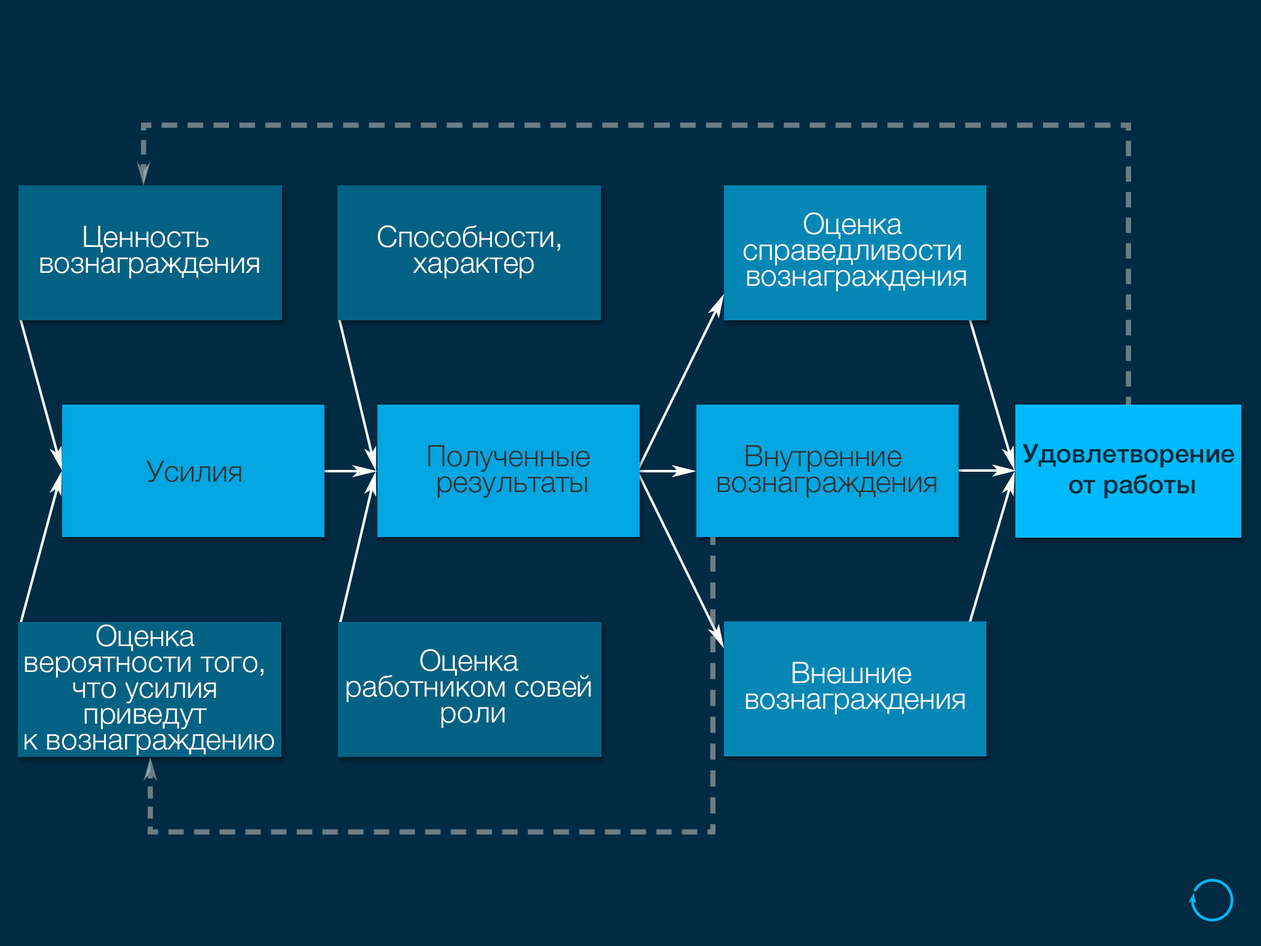
<style>
.page{position:relative;width:1261px;height:946px;background:#002b43}
.page>*{position:absolute;margin:0}
.t1{font:29.6px/25.9px "HelveticaNeue-Light";color:#ffffff}
.t2{font:29.6px/25.9px "HelveticaNeue-Light";color:#303030}
.t3{font:25.9px/30.8px "HelveticaNeue-Medium";color:#002b3b}
.t4{font:29.6px "HelveticaNeue-Light";color:#303030}
</style>
<div class="page">
<p class="t1" style="left:743px;top:212px;width:223px;height:79px;text-align:center">Оценка <br>справедливости <br>вознаграждения</p>
<p class="t1" style="left:40px;top:225px;width:219px;height:53px;text-align:center">Ценность <br>вознаграждения</p>
<p class="t1" style="left:377px;top:225px;width:183px;height:53px;text-align:center">Способности, <br>характер</p>
<p class="t2" style="left:428px;top:445px;width:162px;height:52px;text-align:center">Полученные <br>результаты</p>
<p class="t2" style="left:717px;top:445px;width:219px;height:52px;text-align:center">Внутренние <br>вознаграждения</p>
<p class="t3" style="left:1022px;top:444px;width:212px;height:54px;text-align:center">Удовлетворение <br>от работы</p>
<p class="t4" style="left:146px;top:460px;width:95px;height:22px">Усилия</p>
<p class="t1" style="left:25px;top:624px;width:249px;height:131px;text-align:center">Оценка <br>вероятности того, <br>что усилия <br>приведут <br>к вознаграждению</p>
<p class="t1" style="left:347px;top:649px;width:244px;height:79px;text-align:center">Оценка <br>работником совей <br>роли</p>
<p class="t1" style="left:746px;top:661px;width:219px;height:53px;text-align:center">Внешние <br>вознаграждения</p>
</div>
